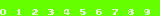
<style>
.page{position:relative;width:160px;height:16px;background:#65ff00}
.page>*{position:absolute;margin:0}
.t1{font:8px "Early-GameBoy";color:#e0f8cf}
</style>
<div class="page">
<p class="t1" style="left:0px;top:9px;width:6px;height:6px">0</p>
<p class="t1" style="left:17px;top:9px;width:4px;height:6px">1</p>
<p class="t1" style="left:32px;top:9px;width:6px;height:6px">2</p>
<p class="t1" style="left:48px;top:9px;width:6px;height:6px">3</p>
<p class="t1" style="left:64px;top:9px;width:6px;height:6px">4</p>
<p class="t1" style="left:80px;top:9px;width:6px;height:6px">5</p>
<p class="t1" style="left:96px;top:9px;width:6px;height:6px">6</p>
<p class="t1" style="left:112px;top:9px;width:6px;height:6px">7</p>
<p class="t1" style="left:128px;top:9px;width:6px;height:6px">8</p>
<p class="t1" style="left:144px;top:9px;width:6px;height:6px">9</p>
</div>
